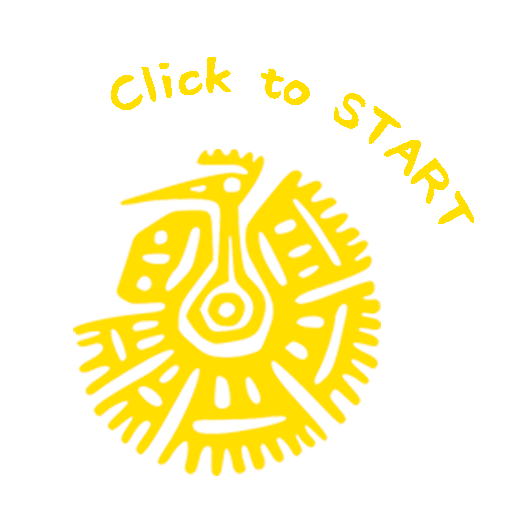
<style>
.page{position:relative;width:512px;height:512px;background:#ffffff}
.page>*{position:absolute;margin:0}
.t1{font:45px "RiiTegakiFude";color:#ffde00}
</style>
<div class="page">
<p class="t1" style="left:111px;top:57px;width:363px;height:167px;rotate:20deg">Click to START</p>
</div>
